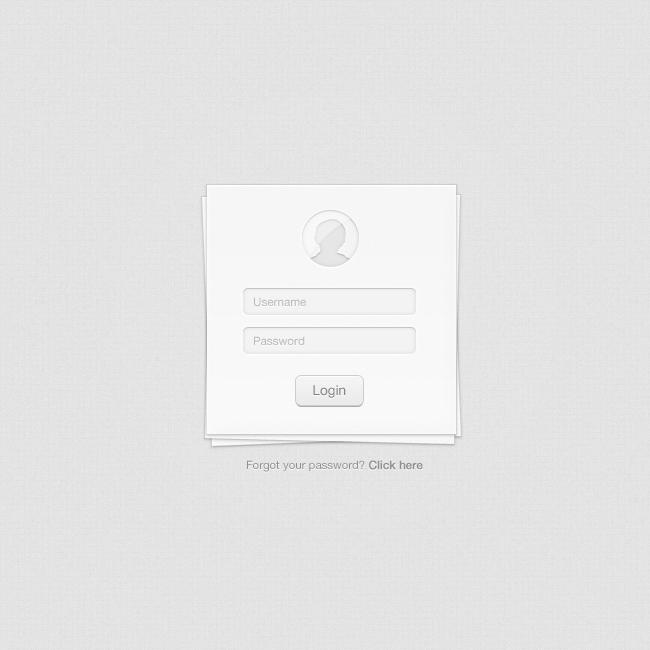
<style>
.page{position:relative;width:650px;height:650px}
.page>*{position:absolute;margin:0}
.t1{font:11.7px "HelveticaNeue";color:#b8b7b7}
.t2{font:13.5px "HelveticaNeue";color:#838282}
.t3{font:11.5px "HelveticaNeue";color:#898888}
.t4{font:11.5px "HelveticaNeue";color:#898888;font-weight:bold}
</style>
<div class="page">
<p class="t1" style="left:254px;top:297px;width:52px;height:10px">Username</p>
<p class="t1" style="left:254px;top:336px;width:51px;height:9px">Password</p>
<p class="t2" style="left:313px;top:385px;width:33px;height:13px">Login</p>
<p class="t3" style="left:247px;top:460px;width:176px;height:12px;opacity:0.9">Forgot your password? <span class="t4">Click here</span></p>
</div>
